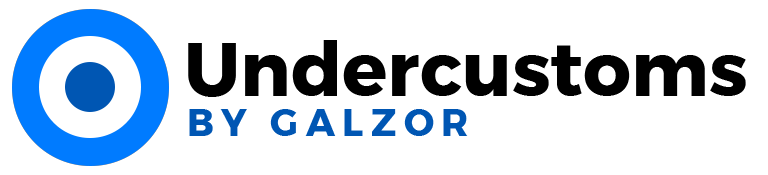
<style>
.page{position:relative;width:768px;height:175px;background:#ffffff}
.page>*{position:absolute;margin:0}
.t1{font:75px "Montserrat-Bold";color:#000000}
.t2{font:37.5px "Montserrat-Bold";letter-spacing:0.2em;color:#0056b3;text-transform:uppercase}
</style>
<div class="page">
<p class="t1" style="left:188px;top:40px;width:558px;height:57px">Undercustoms</p>
<p class="t2" style="left:189px;top:109px;width:279px;height:27px">by galzor</p>
</div>
